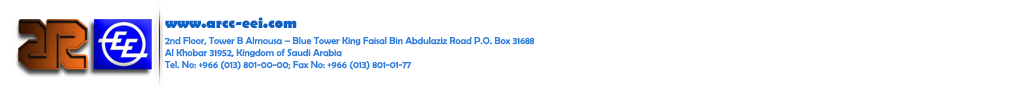
<style>
.page{position:relative;width:1016px;height:88px;background:#ffffff}
.page>*{position:absolute;margin:0}
.t1{font:15px "BerlinSansFB-Bold";color:#0e5fc2}
.t2{font:10px "BerlinSansFB-Reg";color:#317fdd}
</style>
<div class="page">
<p class="t1" style="left:165px;top:17px;width:132px;height:11px">www.arcc-eei.com</p>
<p class="t2" style="left:165px;top:36px;width:370px;height:34px">2nd Floor, Tower B Almousa – Blue Tower King Faisal Bin Abdulaziz Road P.O. Box 31688<br>Al Khobar 31952, Kingdom of Saudi Arabia<br>Tel. No: +966 (013) 801-00-00; Fax No: +966 (013) 801-01-77</p>
</div>
